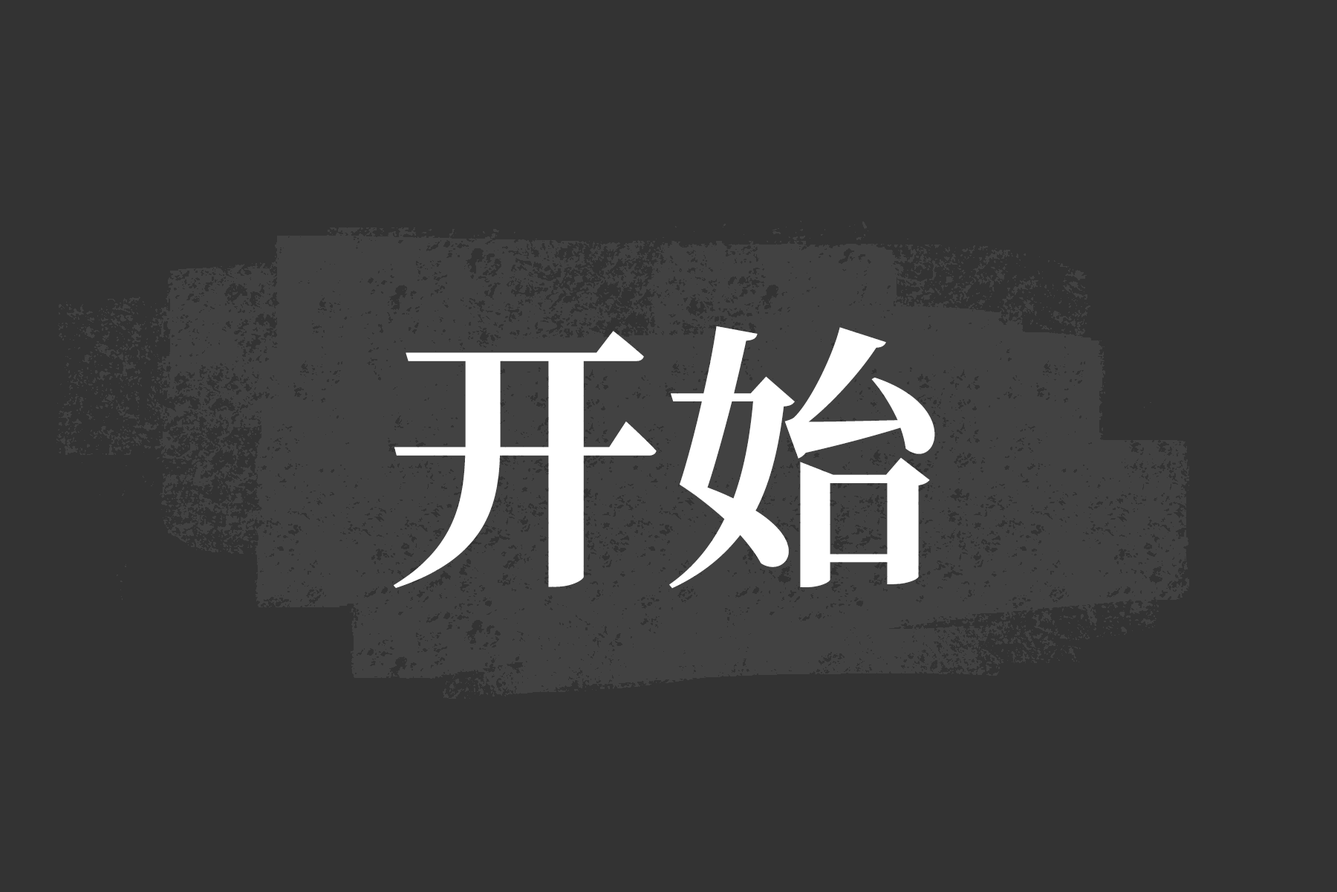
<style>
.page{position:relative;width:1337px;height:892px;background:#333333}
.page>*{position:absolute;margin:0}
.t1{font:278.6px "SourceHanSerifSC-Bold";color:#ffffff}
</style>
<div class="page">
<p class="t1" style="left:394px;top:326px;width:541px;height:262px">开始</p>
</div>
